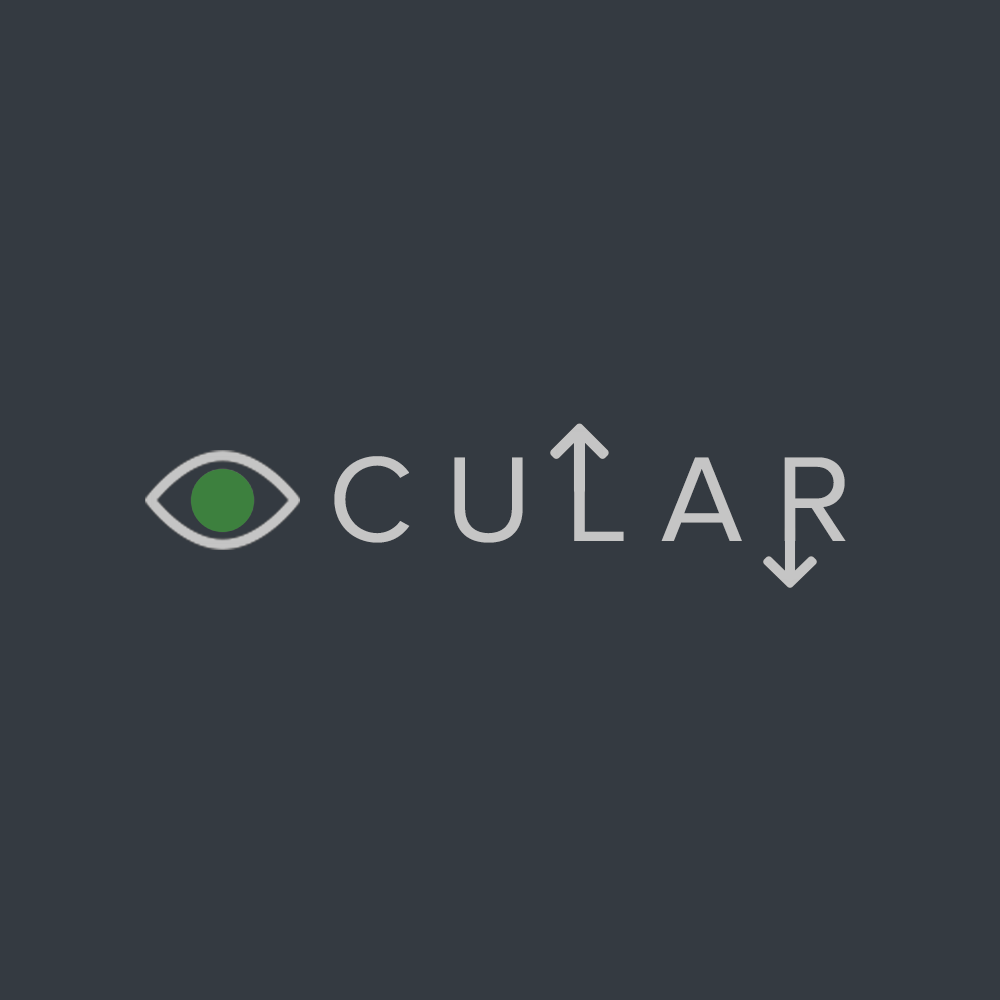
<style>
.page{position:relative;width:1000px;height:1000px;background:#343a41}
.page>*{position:absolute;margin:0}
.t1{font:125px "ProximaNova-Regular";color:#c5c5c5}
</style>
<div class="page">
<p class="t1" style="left:334px;top:456px;width:512px;height:87px">C U L A R</p>
</div>
